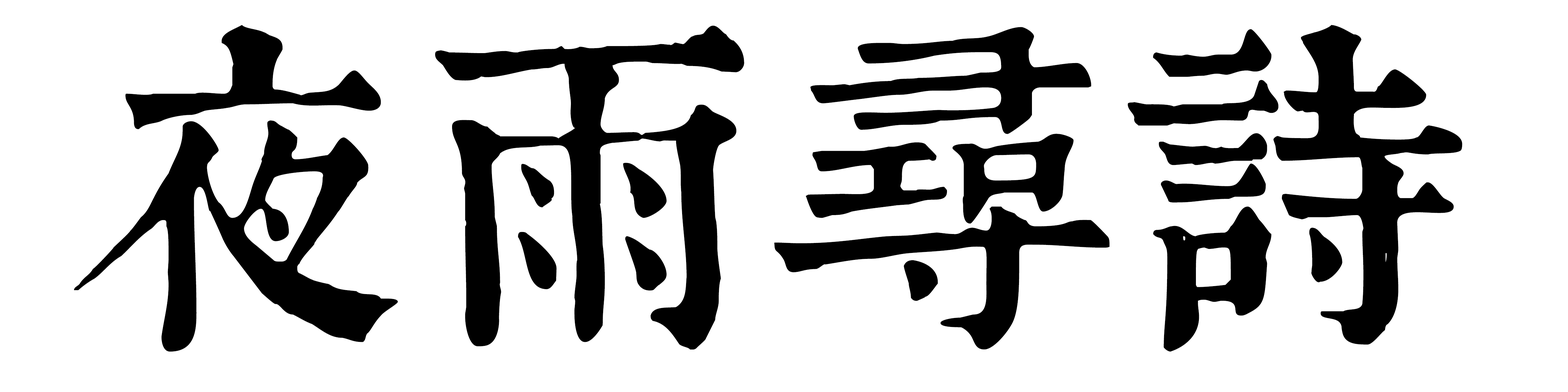
<style>
.page{position:relative;width:1568px;height:392px;background:#ffffff}
.page>*{position:absolute;margin:0}
.t1{font:352.7px "TpldKhangXiDictTrial";color:#000000}
</style>
<div class="page">
<p class="t1" style="left:74px;top:25px;width:1388px;height:327px">夜雨寻诗</p>
</div>
